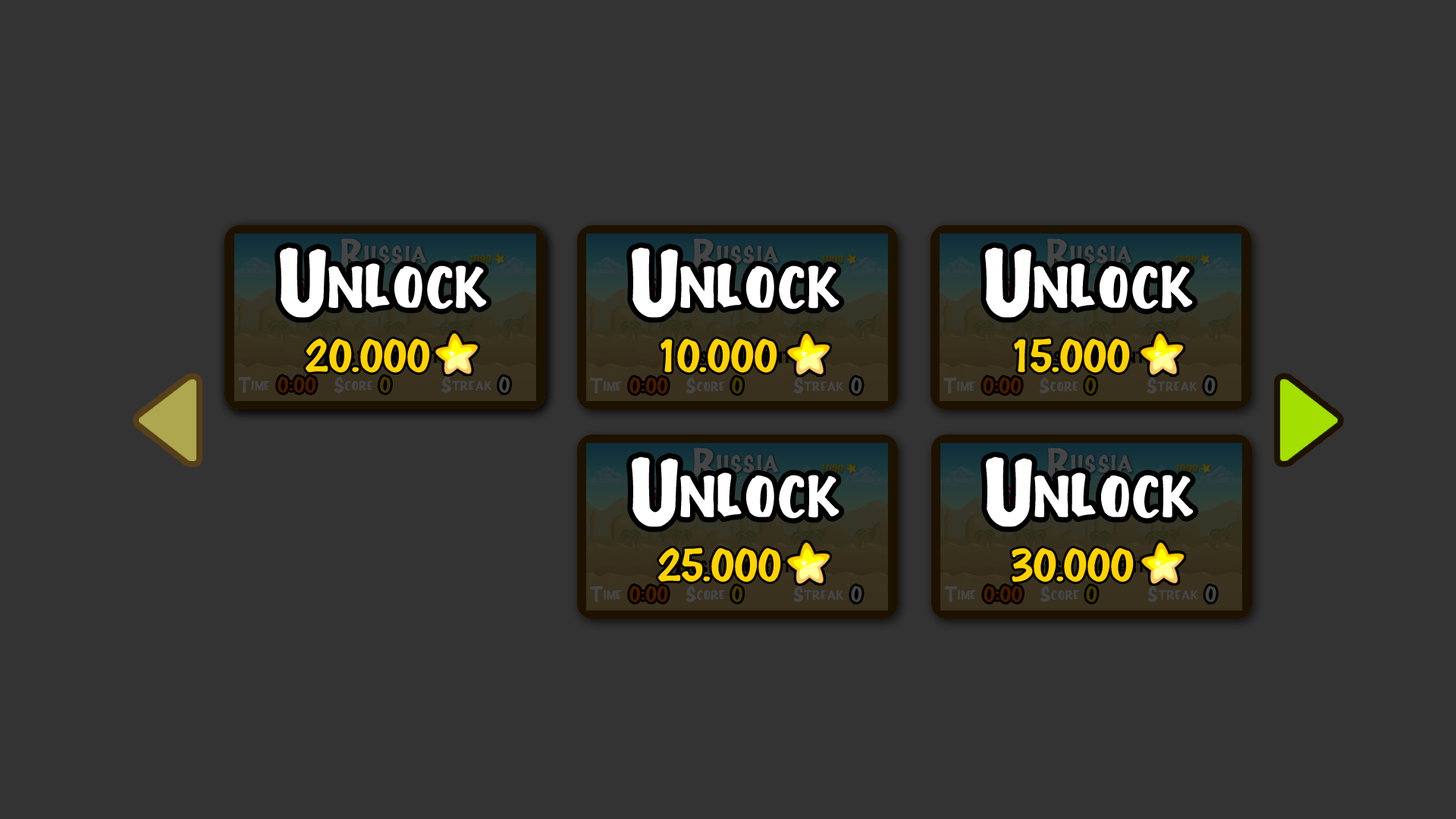
<style>
.page{position:relative;width:1456px;height:819px;background:#333333}
.page>*{position:absolute;margin:0}
.t1{font:29.5px "Full-House20";color:#454545}
.t2{font:73.4px "Full-House20";color:#ffffff}
.t3{font:34.4px "Full-House20";color:#ffd200}
.t4{font:16.7px "Full-House20";color:#454545}
.t5{font:16.7px "Full-House20";color:#451a00}
.t6{font:16.7px "Full-House20";color:#453900}
</style>
<div class="page">
<p class="t1" style="left:340px;top:238px;width:87px;height:30px">Russia</p>
<p class="t1" style="left:693px;top:238px;width:86px;height:30px">Russia</p>
<p class="t1" style="left:1046px;top:238px;width:86px;height:30px">Russia</p>
<p class="t2" style="left:280px;top:247px;width:207px;height:71px">Unlock</p>
<p class="t2" style="left:632px;top:247px;width:207px;height:71px">Unlock</p>
<p class="t2" style="left:985px;top:247px;width:208px;height:71px">Unlock</p>
<p class="t3" style="left:306px;top:338px;width:124px;height:35px">20.000</p>
<p class="t3" style="left:660px;top:338px;width:117px;height:35px">10.000</p>
<p class="t3" style="left:1014px;top:338px;width:116px;height:35px">15.000</p>
<p class="t4" style="left:237px;top:377px;width:32px;height:17px">Time</p>
<p class="t4" style="left:238px;top:376px;width:32px;height:17px">Time</p>
<p class="t5" style="left:278px;top:376px;width:38px;height:17px">0:00</p>
<p class="t4" style="left:333px;top:377px;width:39px;height:17px">Score</p>
<p class="t4" style="left:334px;top:376px;width:39px;height:17px">Score</p>
<p class="t6" style="left:380px;top:376px;width:11px;height:17px">0</p>
<p class="t4" style="left:441px;top:377px;width:50px;height:17px">Streak</p>
<p class="t4" style="left:441px;top:376px;width:50px;height:17px">Streak</p>
<p class="t4" style="left:499px;top:376px;width:11px;height:17px">0</p>
<p class="t4" style="left:590px;top:377px;width:32px;height:17px">Time</p>
<p class="t5" style="left:629px;top:377px;width:39px;height:17px">0:00</p>
<p class="t4" style="left:686px;top:377px;width:39px;height:17px">Score</p>
<p class="t6" style="left:732px;top:377px;width:11px;height:17px">0</p>
<p class="t4" style="left:793px;top:377px;width:50px;height:17px">Streak</p>
<p class="t4" style="left:851px;top:377px;width:11px;height:17px">0</p>
<p class="t4" style="left:943px;top:377px;width:32px;height:17px">Time</p>
<p class="t5" style="left:983px;top:377px;width:38px;height:17px">0:00</p>
<p class="t4" style="left:1039px;top:377px;width:39px;height:17px">Score</p>
<p class="t6" style="left:1085px;top:377px;width:12px;height:17px">0</p>
<p class="t4" style="left:1147px;top:377px;width:50px;height:17px">Streak</p>
<p class="t4" style="left:1204px;top:377px;width:12px;height:17px">0</p>
<p class="t1" style="left:693px;top:447px;width:86px;height:30px">Russia</p>
<p class="t1" style="left:1047px;top:447px;width:86px;height:30px">Russia</p>
<p class="t2" style="left:632px;top:457px;width:207px;height:70px">Unlock</p>
<p class="t2" style="left:986px;top:457px;width:208px;height:70px">Unlock</p>
<p class="t3" style="left:658px;top:548px;width:123px;height:34px">25.000</p>
<p class="t3" style="left:1012px;top:548px;width:122px;height:34px">30.000</p>
<p class="t4" style="left:590px;top:585px;width:32px;height:17px">Time</p>
<p class="t5" style="left:629px;top:585px;width:39px;height:17px">0:00</p>
<p class="t4" style="left:686px;top:585px;width:39px;height:17px">Score</p>
<p class="t6" style="left:732px;top:585px;width:11px;height:17px">0</p>
<p class="t4" style="left:793px;top:585px;width:50px;height:17px">Streak</p>
<p class="t4" style="left:851px;top:585px;width:11px;height:17px">0</p>
<p class="t4" style="left:944px;top:585px;width:32px;height:17px">Time</p>
<p class="t5" style="left:984px;top:585px;width:38px;height:17px">0:00</p>
<p class="t4" style="left:1040px;top:585px;width:39px;height:17px">Score</p>
<p class="t6" style="left:1086px;top:585px;width:11px;height:17px">0</p>
<p class="t4" style="left:1147px;top:585px;width:51px;height:17px">Streak</p>
<p class="t4" style="left:1205px;top:585px;width:11px;height:17px">0</p>
</div>
